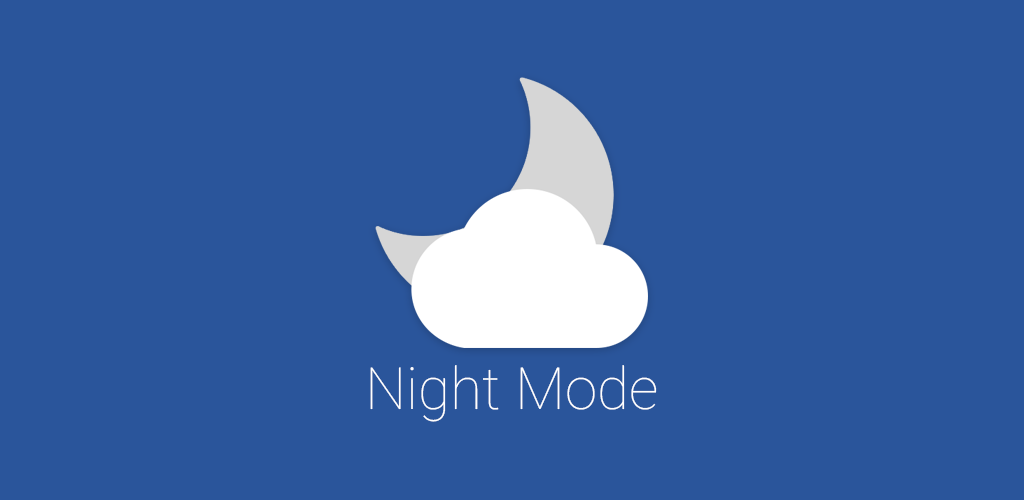
<style>
.page{position:relative;width:1024px;height:500px;background:#2a559b}
.page>*{position:absolute;margin:0}
.t1{font:58.3px "Roboto-Thin";color:#ffffff}
</style>
<div class="page">
<p class="t1" style="left:370px;top:365px;width:287px;height:57px">Night Mode</p>
</div>
